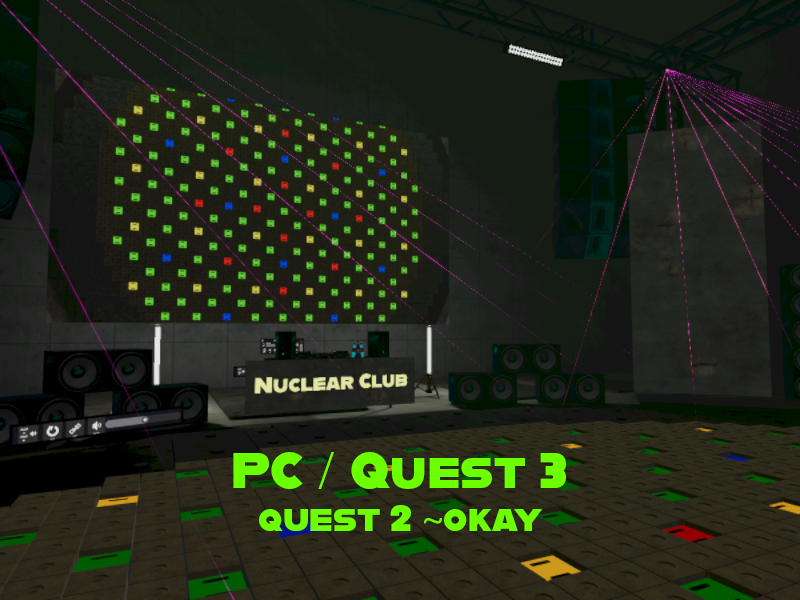
<style>
.page{position:relative;width:800px;height:600px}
.page>*{position:absolute;margin:0}
.t1{font:50px "Alfarn";color:#6cff00}
.t2{font:36px "Alfarn";color:#6cff00}
.t3{font:36px "MyriadPro-Regular";color:#6cff00}
</style>
<div class="page">
<p class="t1" style="left:233px;top:452px;width:333px;height:79px;text-align:center">PC / Quest 3<br><span class="t2">quest 2 </span><span class="t3">~</span><span class="t2">okay</span></p>
</div>
